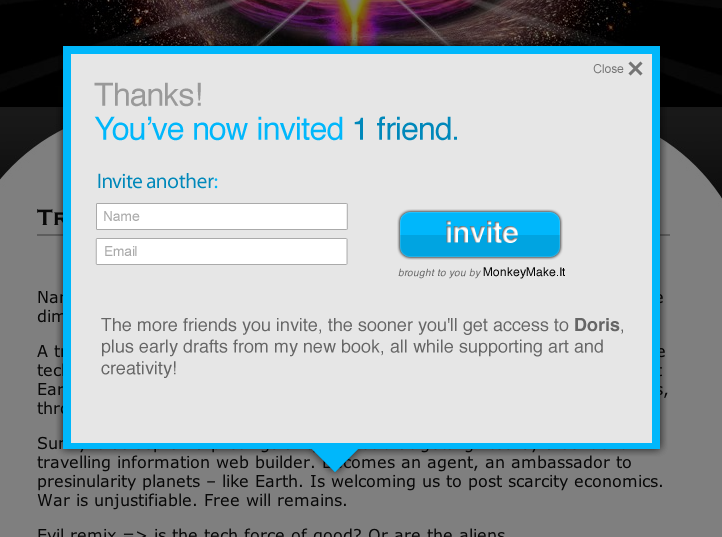
<style>
.page{position:relative;width:722px;height:537px;background:#e6e6e6}
.page>*{position:absolute;margin:0}
.t1{font:32px/34px "Helvetica";letter-spacing:-0.025em;color:#00b7fb}
.t2{font:32px/33px "Helvetica";letter-spacing:-0.025em;color:#999999}
.t3{font:32px/34px "Helvetica";letter-spacing:-0.025em;color:#0088ba}
.t4{font:21px "MyriadPro-Regular";letter-spacing:-0.025em;color:#0088ba}
.t5{font:21px "MyriadPro-Regular";letter-spacing:-0.025em;color:#00b7fb}
.t6{font:14px "ArialMT";letter-spacing:-0.025em;color:#aaaaaa}
.t7{font:30px "Helvetica-Bold";letter-spacing:-0.025em}
.t8{font:10px "Helvetica-Oblique";color:#666666}
.t9{font:12px "Helvetica";color:#000000}
.t10{font:18px "Helvetica";color:#666666}
.t11{font:18px "Helvetica-Bold";color:#666666}
</style>
<div class="page">
<p class="t1" style="left:94px;top:82px;width:363px;height:59px"><span class="t2">Thanks! </span><br>You’ve now invited <span class="t3">1 friend.</span></p>
<p class="t4" style="left:98px;top:173px;width:120px;height:16px">Invite another<span class="t5">:</span></p>
<p class="t6" style="left:104px;top:211px;width:36px;height:10px">Name</p>
<p class="t7" style="left:446px;top:220px;width:72px;height:23px">invite</p>
<p class="t6" style="left:105px;top:246px;width:32px;height:10px">Email</p>
<p class="t8" style="left:398px;top:267px;width:167px;height:12px">brought to you by <span class="t9">MonkeyMake.It</span></p>
<p class="t10" style="left:101px;top:318px;width:522px;height:60px">The more friends you invite, the sooner you'll get access to <span class="t11">Doris</span>, plus early drafts from my new book, all while supporting art and creativity!</p>
</div>
